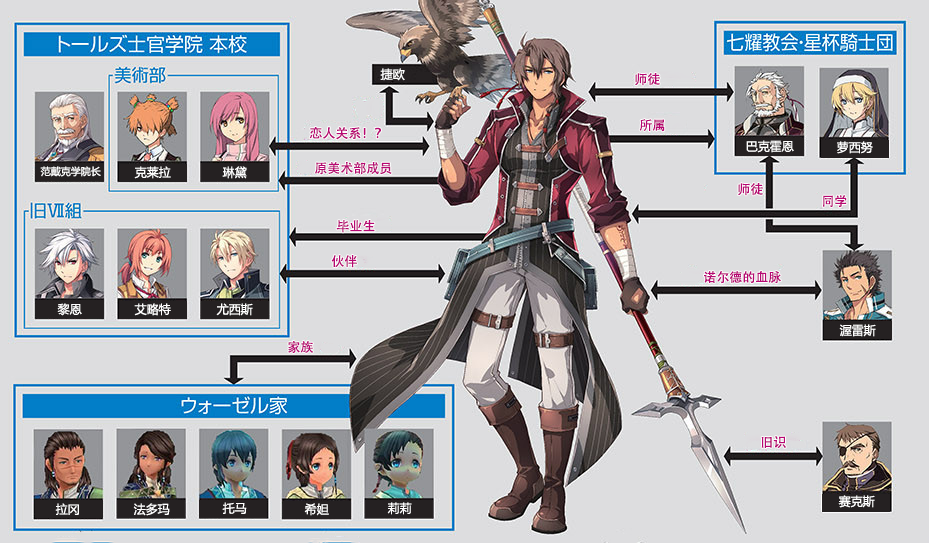
<style>
.page{position:relative;width:929px;height:543px;background:#dddddf}
.page>*{position:absolute;margin:0}
.t1{font:12px "MicrosoftYaHei";color:#ffffff}
.t2{font:13px "AdobeHeitiStd-Regular";color:#b70773}
.t3{font:10px "MicrosoftYaHei";color:#ffffff}
</style>
<div class="page">
<p class="t1" style="left:380px;top:68px;width:25px;height:13px">捷欧</p>
<p class="t2" style="left:635px;top:73px;width:25px;height:13px">师徒</p>
<p class="t2" style="left:639px;top:119px;width:26px;height:13px">所属</p>
<p class="t2" style="left:309px;top:127px;width:72px;height:13px">恋人关系！？</p>
<p class="t1" style="left:746px;top:140px;width:48px;height:13px">巴克霍恩</p>
<p class="t1" style="left:837px;top:141px;width:36px;height:13px">萝西努</p>
<p class="t3" style="left:40px;top:166px;width:61px;height:11px">范戴克学院长</p>
<p class="t1" style="left:134px;top:166px;width:37px;height:13px">克莱拉</p>
<p class="t1" style="left:222px;top:166px;width:25px;height:13px">琳黛</p>
<p class="t2" style="left:315px;top:162px;width:77px;height:13px">原美术部成员</p>
<p class="t2" style="left:738px;top:183px;width:25px;height:13px">师徒</p>
<p class="t2" style="left:823px;top:195px;width:24px;height:13px">同学</p>
<p class="t2" style="left:336px;top:220px;width:39px;height:13px">毕业生</p>
<p class="t2" style="left:331px;top:255px;width:26px;height:13px">伙伴</p>
<p class="t2" style="left:704px;top:271px;width:77px;height:13px">诺尔德的血脉</p>
<p class="t1" style="left:57px;top:303px;width:25px;height:13px">黎恩</p>
<p class="t1" style="left:134px;top:303px;width:37px;height:13px">艾略特</p>
<p class="t1" style="left:216px;top:303px;width:37px;height:13px">尤西斯</p>
<p class="t1" style="left:839px;top:324px;width:37px;height:13px">渥雷斯</p>
<p class="t2" style="left:288px;top:341px;width:25px;height:12px">家族</p>
<p class="t2" style="left:761px;top:436px;width:25px;height:13px">旧识</p>
<p class="t1" style="left:838px;top:495px;width:37px;height:13px">赛克斯</p>
<p class="t1" style="left:55px;top:503px;width:24px;height:12px">拉冈</p>
<p class="t1" style="left:133px;top:503px;width:37px;height:13px">法多玛</p>
<p class="t1" style="left:222px;top:502px;width:25px;height:12px">托马</p>
<p class="t1" style="left:304px;top:503px;width:25px;height:13px">希妲</p>
<p class="t1" style="left:387px;top:502px;width:25px;height:13px">莉莉</p>
</div>
